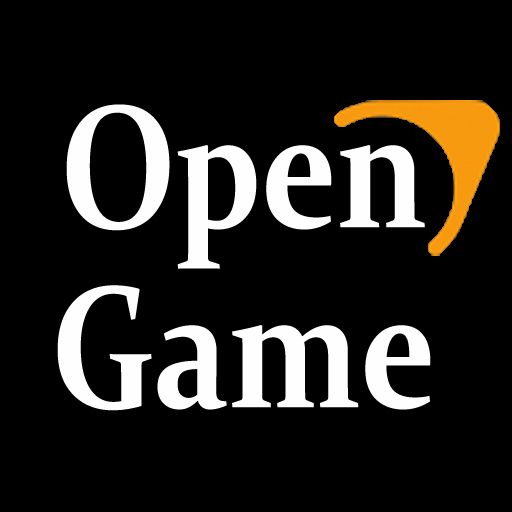
<style>
.page{position:relative;width:512px;height:512px;background:#000000}
.page>*{position:absolute;margin:0}
.t1{font:175px/180px "Constantia-Bold";color:#fefefe;scale:0.8 1}
</style>
<div class="page">
<p class="t1" style="left:57px;top:104px;width:374px;height:307px;text-align:center">Open<br>Game</p>
</div>
